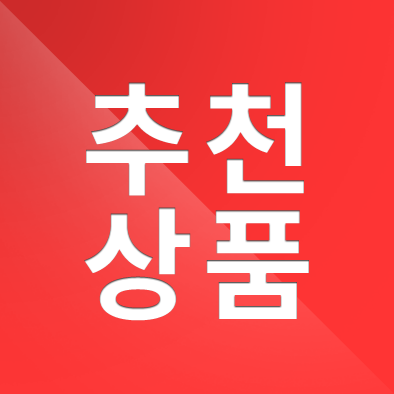
<style>
.page{position:relative;width:394px;height:394px}
.page>*{position:absolute;margin:0}
.t1{font:122.6px/125px "NotoSansCJKkr-Bold";letter-spacing:0.065em;color:#ffffff}
</style>
<div class="page">
<p class="t1" style="left:84px;top:82px;width:225px;height:239px">추천<br>상품</p>
</div>
